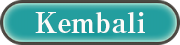
<style>
.page{position:relative;width:180px;height:45px}
.page>*{position:absolute;margin:0}
.t1{font:28px "RyuminPro-ExBold";color:#fdfbf9}
</style>
<div class="page">
<p class="t1" style="left:35px;top:12px;width:110px;height:21px">Kembali</p>
</div>
